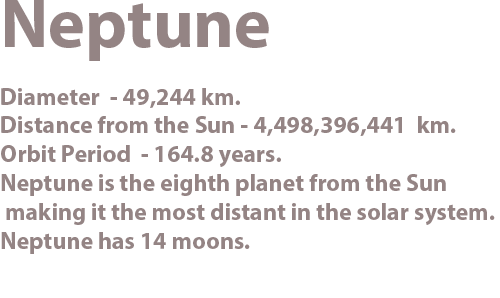
<style>
.page{position:relative;width:500px;height:298px;background:#ffffff}
.page>*{position:absolute;margin:0}
.t1{font:24px "MyriadHebrew-Bold";color:#887777}
.t2{font:70px "MyriadHebrew-Bold";color:#887777}
</style>
<div class="page">
<p class="t1" style="left:1px;top:0px;width:494px;height:254px;text-align:right;opacity:0.9"><span class="t2">Neptune<br></span><br>Diameter  - 49,244 km.<br>Distance from the Sun - 4,498,396,441  km.<br>Orbit Period  - 164.8 years.<br>Neptune is the eighth planet from the Sun<br> making it the most distant in the solar system.<br>Neptune has 14 moons.</p>
</div>
